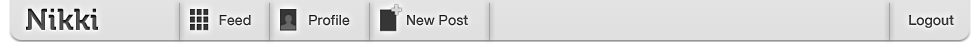
<style>
.page{position:relative;width:979px;height:51px;background:#e0e0e0}
.page>*{position:absolute;margin:0}
.t1{font:30px "Museo-700";color:#515151}
.t2{font:14px "HelveticaNeue-Medium";color:#2d2d2d}
.t3{font:14px "HelveticaNeue-Medium";color:#303030}
.t4{font:14px "HelveticaNeue-Medium";color:#313131}
.t5{font:14px "HelveticaNeue-Medium";color:#333333}
</style>
<div class="page">
<p class="t1" style="left:26px;top:8px;width:72px;height:22px">Nikki</p>
<p class="t2" style="left:219px;top:15px;width:32px;height:11px">Feed</p>
<p class="t3" style="left:309px;top:15px;width:41px;height:11px">Profile</p>
<p class="t4" style="left:407px;top:15px;width:61px;height:11px">New Post</p>
<p class="t5" style="left:909px;top:15px;width:45px;height:13px">Logout</p>
</div>
